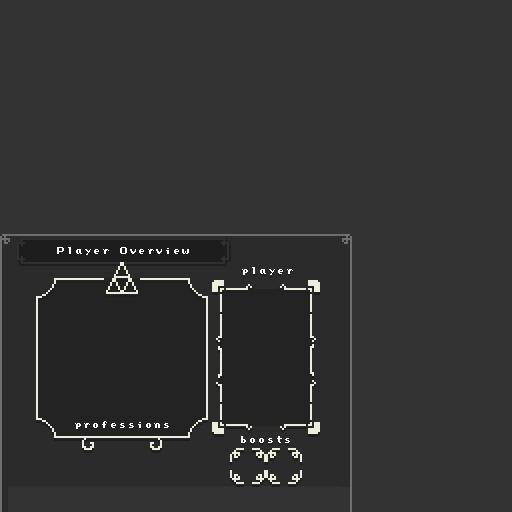
<style>
.page{position:relative;width:512px;height:512px;background:#333333}
.page>*{position:absolute;margin:0}
.t1{font:8px "PressStartReg";letter-spacing:0.12em;color:#ffffff}
</style>
<div class="page">
<p class="t1" style="left:57px;top:247px;width:132px;height:8px">Player Overview</p>
<p class="t1" style="left:242px;top:267px;width:51px;height:8px">player</p>
<p class="t1" style="left:75px;top:421px;width:94px;height:8px">professions</p>
<p class="t1" style="left:241px;top:436px;width:49px;height:7px">boosts</p>
</div>
